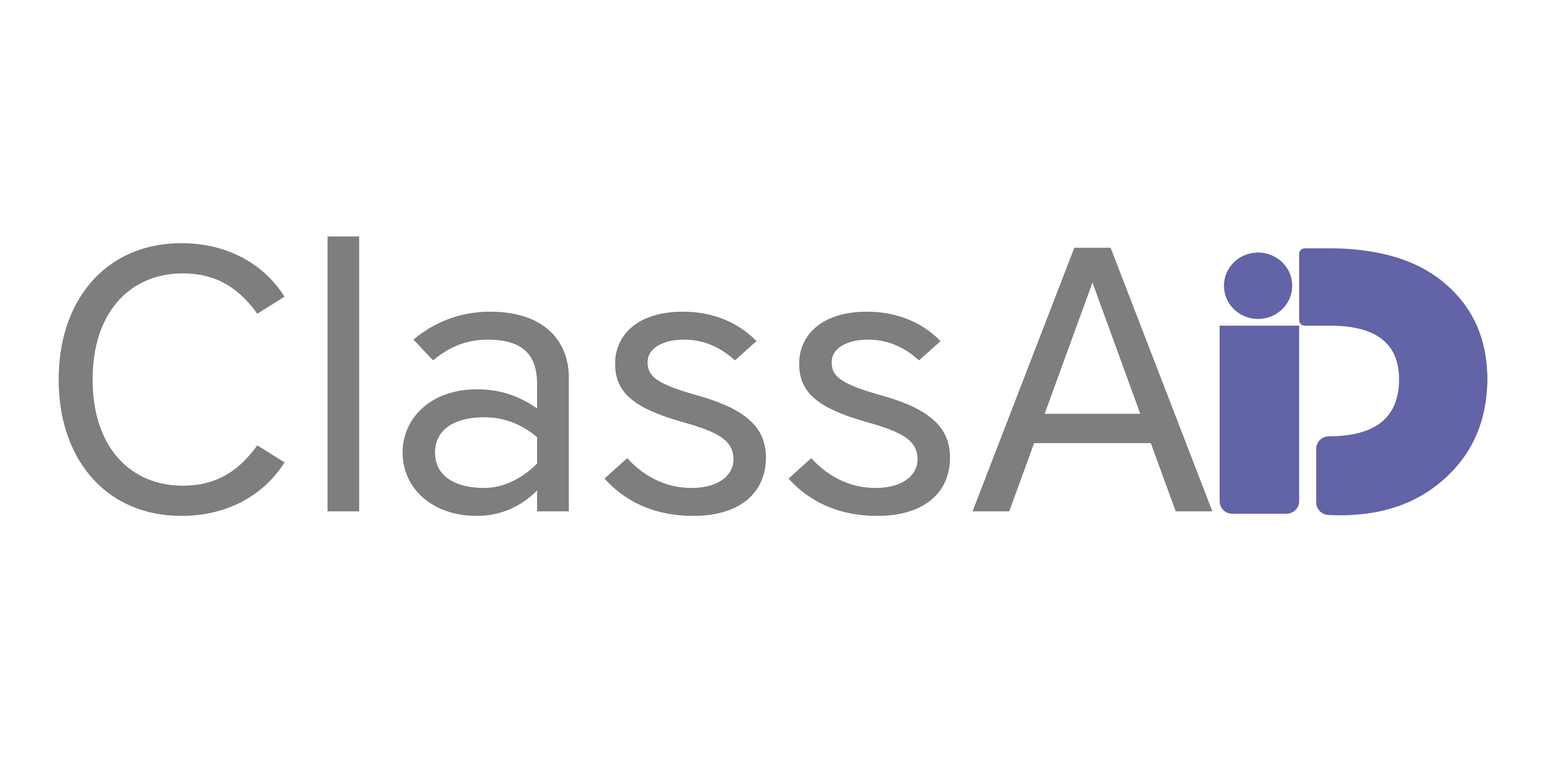
<style>
.page{position:relative;width:1546px;height:771px;background:#ffffff}
.page>*{position:absolute;margin:0}
.t1{font:376.8px "CoreSansA45Regular";color:#7e7e7e}
</style>
<div class="page">
<p class="t1" style="left:58px;top:236px;width:1154px;height:280px">ClassA</p>
</div>
